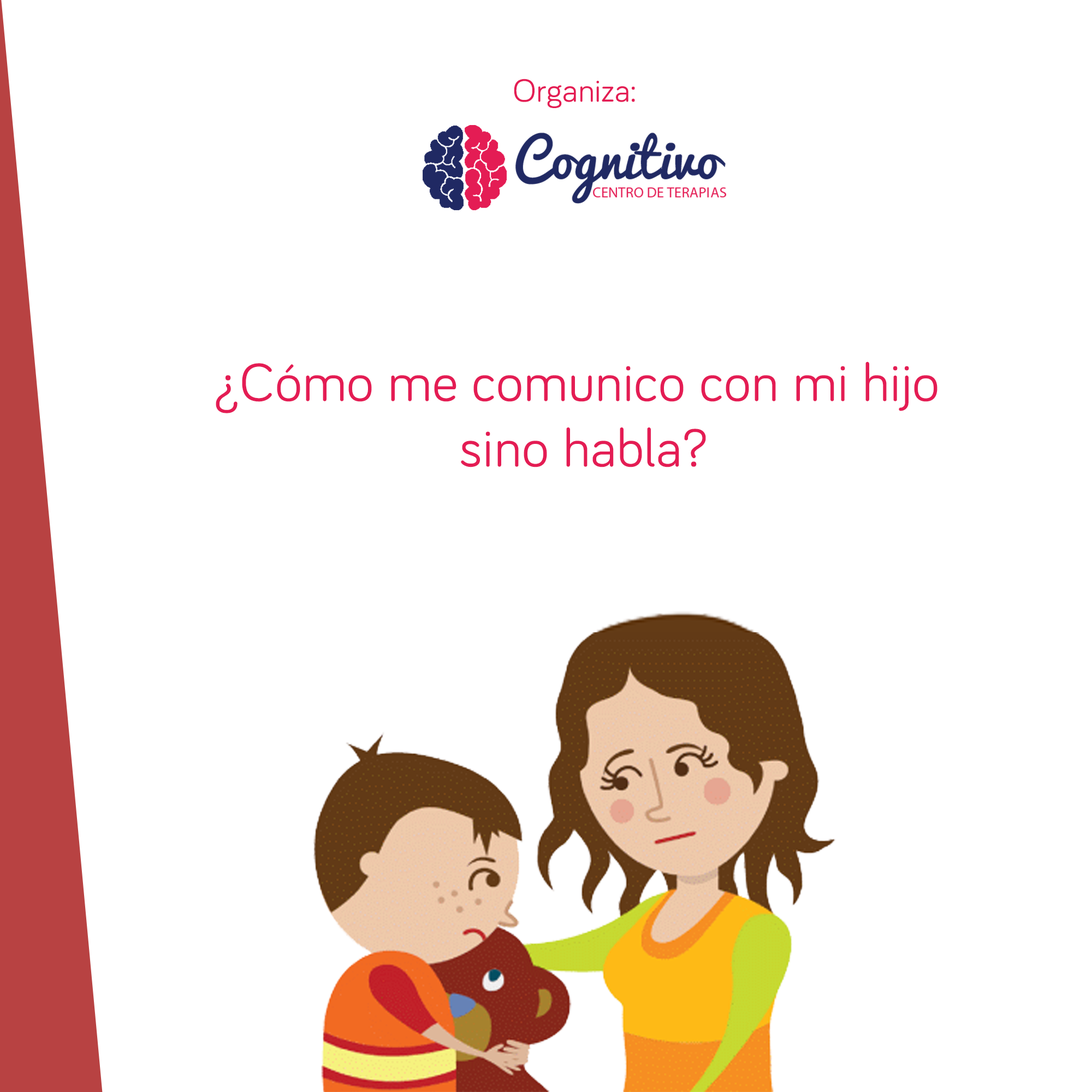
<style>
.page{position:relative;width:1092px;height:1092px;background:#ffffff}
.page>*{position:absolute;margin:0}
.t1{font:32.8px "Bariol-Regular";letter-spacing:0.01em;color:#e41c54}
.t2{font:54.6px "Bariol-Regular";letter-spacing:0.01em;color:#e41c54}
</style>
<div class="page">
<p class="t1" style="left:514px;top:79px;width:121px;height:29px">Organiza:</p>
<p class="t2" style="left:216px;top:361px;width:721px;height:106px;text-align:center">¿Cómo me comunico con mi hijo <br>sino habla?</p>
</div>
